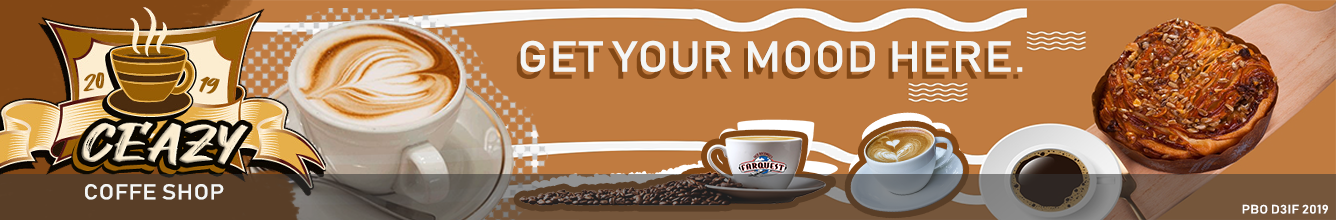
<style>
.page{position:relative;width:1336px;height:220px;background:#c07b40}
.page>*{position:absolute;margin:0}
.t1{font:42.7px "Bahnschrift";letter-spacing:0.02em;color:#f4f6f5;scale:1.13 1}
.t2{font:42.7px "Bahnschrift";letter-spacing:0.02em;color:#824715;scale:1.13 1}
.t3{font:21.2px "Bahnschrift";letter-spacing:0.02em;color:#f4f6f5;scale:1.13 1}
.t4{font:12px "Bahnschrift";letter-spacing:0.02em;color:#ffffff;scale:1.13 1}
</style>
<div class="page">
<p class="t1" style="left:520px;top:40px;width:503px;height:32px">GET YOUR MOOD HERE.</p>
<p class="t2" style="left:516px;top:47px;width:503px;height:32px">GET YOUR MOOD HERE.</p>
<p class="t3" style="left:85px;top:184px;width:139px;height:16px">COFFE SHOP</p>
<p class="t4" style="left:1242px;top:204px;width:86px;height:10px">PBO D3IF 2019</p>
</div>
